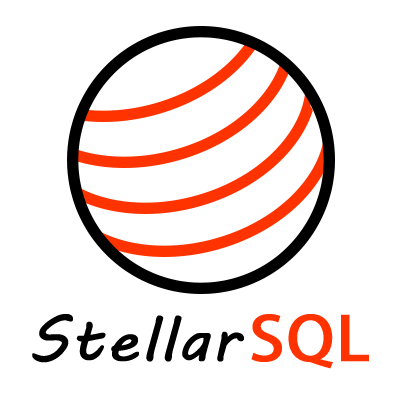
<style>
.page{position:relative;width:400px;height:400px;background:#ffffff}
.page>*{position:absolute;margin:0}
.t1{font:60px "MVBoli";color:#000000;font-weight:bold;scale:1.1 1}
.t2{font:60px "AdobeHeitiStd-Regular";color:#ff3300;font-weight:bold;scale:1.1 1}
</style>
<div class="page">
<p class="t1" style="left:32px;top:314px;width:212px;height:49px">Stellar</p>
<p class="t2" style="left:251px;top:314px;width:118px;height:55px">SQL</p>
</div>
